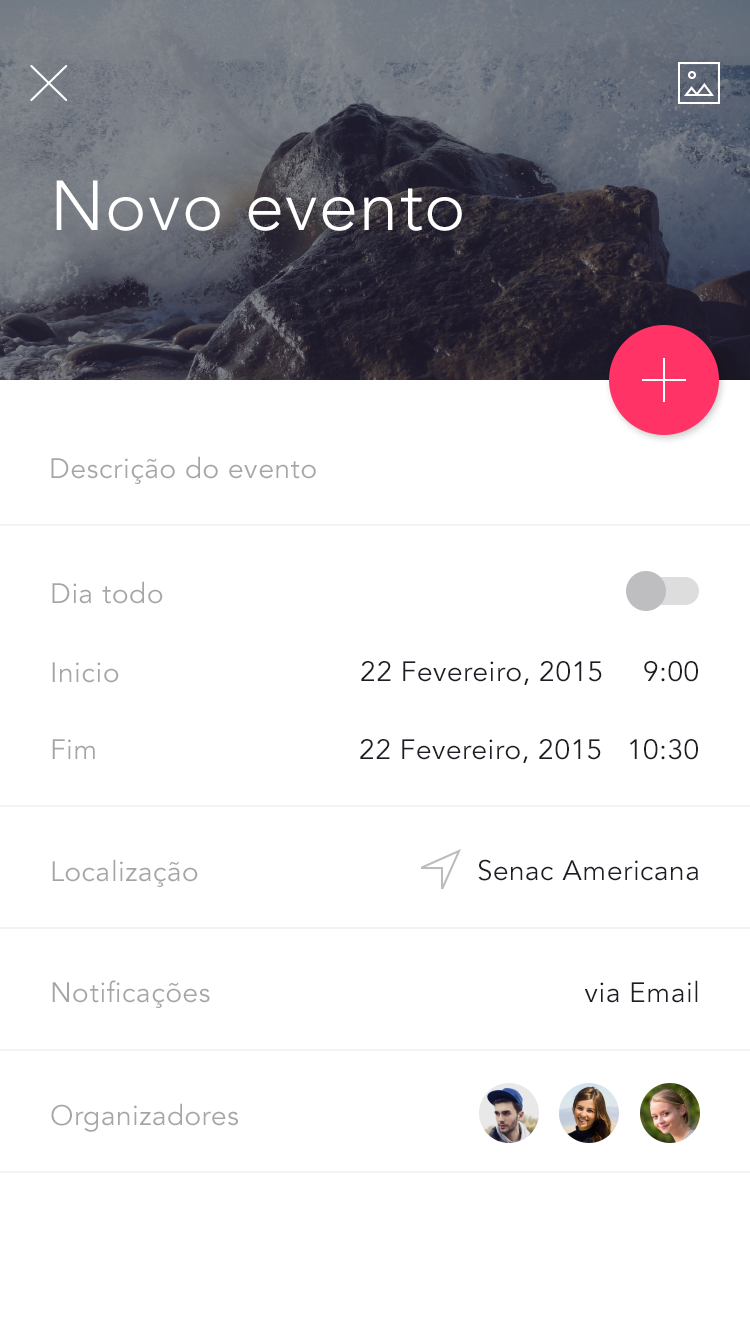
<style>
.page{position:relative;width:750px;height:1334px;background:#ffffff}
.page>*{position:absolute;margin:0}
.t1{font:70px "AvenirLTStd-Light";letter-spacing:0.02em;color:#ffffff}
.t2{font:28px "AvenirLTStd-Book";letter-spacing:0.02em;color:#a5a5a7}
.t3{font:28px "AvenirLTStd-Book";letter-spacing:0.02em;color:#1d1d26}
</style>
<div class="page">
<p class="t1" style="left:56px;top:180px;width:406px;height:51px">Novo evento</p>
<p class="t2" style="left:51px;top:456px;width:265px;height:28px">Descrição do evento</p>
<p class="t2" style="left:52px;top:581px;width:111px;height:23px">Dia todo</p>
<p class="t2" style="left:52px;top:662px;width:67px;height:21px">Inicio</p>
<p class="t3" style="left:361px;top:661px;width:241px;height:24px">22 Fevereiro, 2015</p>
<p class="t3" style="left:644px;top:661px;width:54px;height:21px">9:00</p>
<p class="t2" style="left:52px;top:739px;width:43px;height:20px">Fim</p>
<p class="t3" style="left:360px;top:739px;width:241px;height:24px">22 Fevereiro, 2015</p>
<p class="t3" style="left:630px;top:739px;width:68px;height:21px">10:30</p>
<p class="t2" style="left:52px;top:859px;width:146px;height:28px">Localização</p>
<p class="t3" style="left:478px;top:859px;width:220px;height:22px">Senac Americana</p>
<p class="t2" style="left:52px;top:980px;width:158px;height:28px">Notificações</p>
<p class="t3" style="left:584px;top:980px;width:114px;height:23px">via Email</p>
<p class="t2" style="left:51px;top:1103px;width:187px;height:29px">Organizadores</p>
</div>
